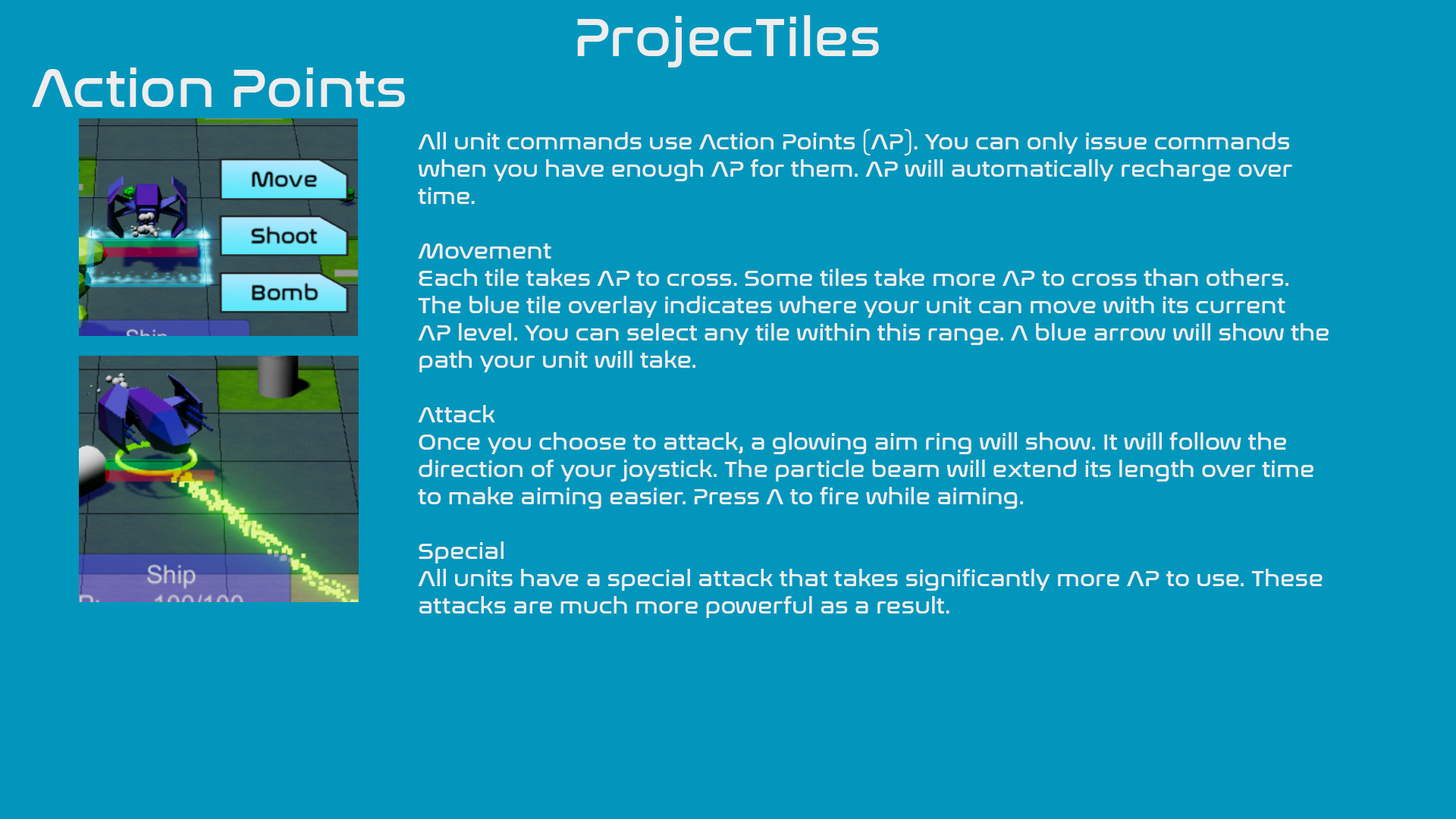
<style>
.page{position:relative;width:1456px;height:819px;background:#0296bd}
.page>*{position:absolute;margin:0}
.t1{font:54.6px "NasalizationRg-Regular";color:#ededed}
.t2{font:22.7px "NasalizationRg-Regular";color:#ededed}
</style>
<div class="page">
<p class="t1" style="left:577px;top:15px;width:302px;height:52px">ProjecTiles</p>
<p class="t1" style="left:32px;top:67px;width:373px;height:40px">Action Points</p>
<p class="t2" style="left:418px;top:129px;width:911px;height:489px">All unit commands use Action Points (AP). You can only issue commands<br>when you have enough AP for them. AP will automatically recharge over<br>time.<br><br>Movement<br>Each tile takes AP to cross. Some tiles take more AP to cross than others. <br>The blue tile overlay indicates where your unit can move with its current<br>AP level. You can select any tile within this range. A blue arrow will show the<br>path your unit will take.<br><br>Attack<br>Once you choose to attack, a glowing aim ring will show. It will follow the <br>direction of your joystick. The particle beam will extend its length over time<br>to make aiming easier. Press A to fire while aiming. <br><br>Special<br>All units have a special attack that takes significantly more AP to use. These<br>attacks are much more powerful as a result.</p>
</div>
